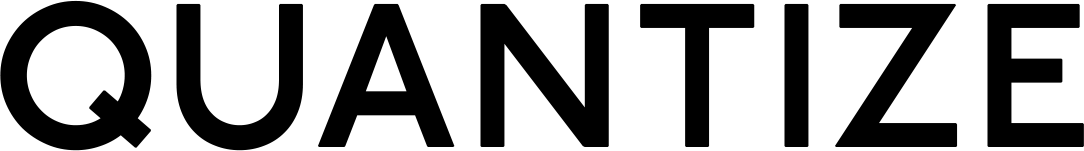
<style>
.page{position:relative;width:1084px;height:151px;background:#ffffff}
.page>*{position:absolute;margin:0}
.t1{font:204.3px "_P22-Underground-Demi-Regular";letter-spacing:0.05em;color:#000000}
</style>
<div class="page">
<p class="t1" style="left:0px;top:0px;width:1084px;height:151px">QUANTIZE</p>
</div>
